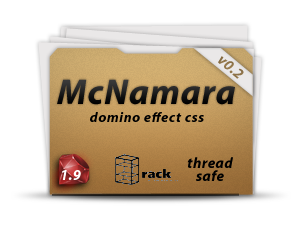
<style>
.page{position:relative;width:303px;height:228px;background:#ffffff}
.page>*{position:absolute;margin:0}
.t1{font:15px "MyriadPro-BoldIt";letter-spacing:0.025em;color:#8f7449}
.t2{font:36px "MyriadPro-BoldIt";letter-spacing:0.025em;color:#1a1a1a}
.t3{font:14px "MyriadPro-BoldIt";letter-spacing:0.05em;color:#000000}
</style>
<div class="page">
<p class="t1" style="left:218px;top:56px;width:26px;height:23px;rotate:40deg">v0.2</p>
<p class="t2" style="left:57px;top:79px;width:178px;height:26px">McNamara</p>
<p class="t3" style="left:90px;top:112px;width:114px;height:10px">domino effect css</p>
</div>
